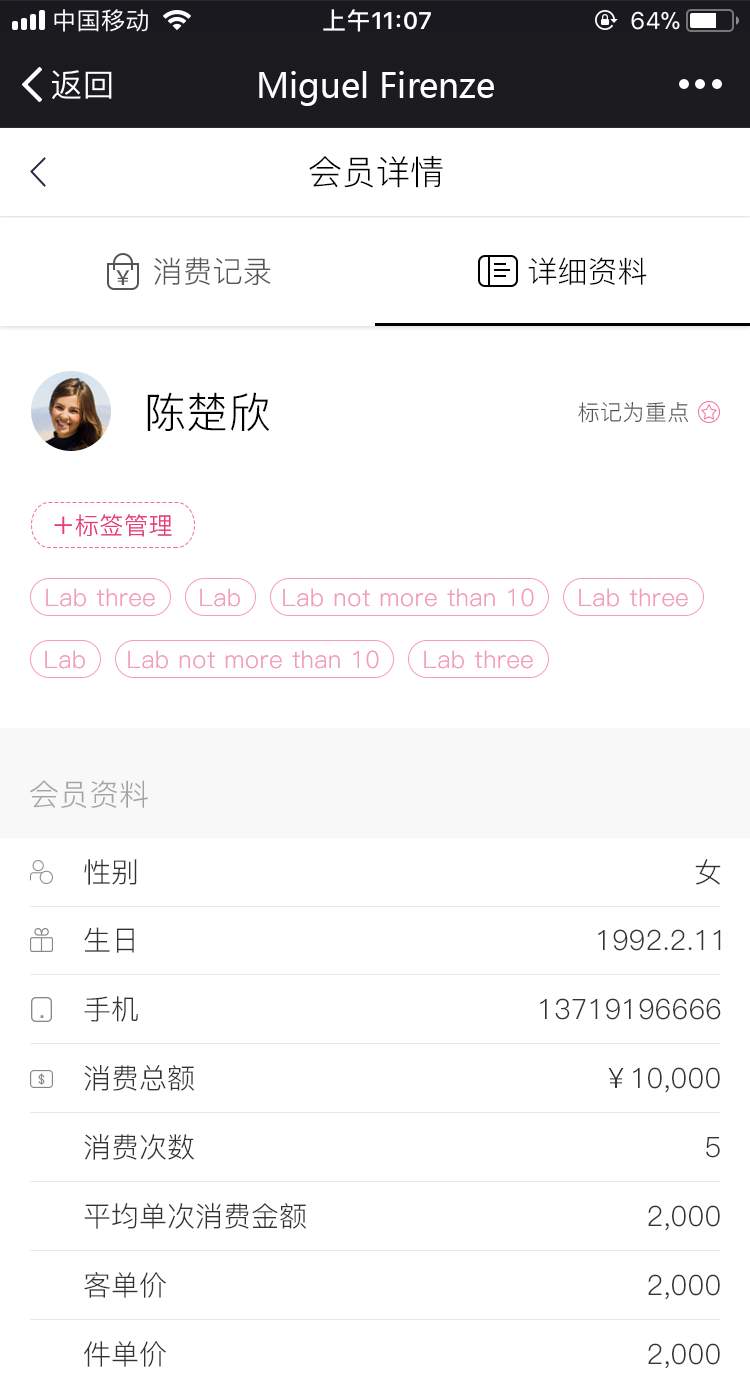
<style>
.page{position:relative;width:750px;height:1388px;background:#ffffff}
.page>*{position:absolute;margin:0}
.t1{font:34px "MicrosoftYaHei";color:#ffffff}
.t2{font:34px "PingFang-SC-Regular";color:#000000}
.t3{font:30px "PingFang-SC-Regular";color:#555555}
.t4{font:30px "PingFang-SC-Regular";color:#000000}
.t5{font:20px "SourceHanSansCN-Medium";color:#555555}
.t6{font:42px "PingFang-SC-Regular";letter-spacing:0.02em;color:#000000}
.t7{font:22px "PingFang-SC-Regular";letter-spacing:0.02em;color:#555555}
.t8{font:24px "PingFang-SC-Regular";letter-spacing:0.03em;color:#e43d7a}
.t9{font:34px "PingFang-SC-Regular";letter-spacing:0.03em;color:#e43d7a}
.t10{font:24px "PingFang-SC-Regular";letter-spacing:0.03em;color:#f19ebc}
.t11{font:30px "PingFang-SC-Regular";color:#a3a3a5}
.t12{font:28px "PingFang-SC-Regular";color:#333333}
</style>
<div class="page">
<p class="t1" style="left:259px;top:71px;width:235px;height:35px">Miguel Firenze</p>
<p class="t2" style="left:309px;top:156px;width:134px;height:32px">会员详情</p>
<p class="t3" style="left:154px;top:257px;width:117px;height:28px">消费记录</p>
<p class="t4" style="left:528px;top:257px;width:119px;height:28px">详细资料</p>
<p class="t5" style="left:116px;top:270px;width:14px;height:15px">￥</p>
<p class="t6" style="left:147px;top:392px;width:123px;height:40px">陈楚欣</p>
<p class="t7" style="left:578px;top:401px;width:110px;height:22px">标记为重点</p>
<p class="t8" style="left:54px;top:514px;width:118px;height:23px"><span class="t9">+</span>标签管理</p>
<p class="t10" style="left:46px;top:588px;width:109px;height:19px">Lab three</p>
<p class="t10" style="left:200px;top:588px;width:40px;height:19px">Lab</p>
<p class="t10" style="left:283px;top:588px;width:251px;height:19px">Lab not more than 10</p>
<p class="t10" style="left:579px;top:588px;width:109px;height:19px">Lab three</p>
<p class="t10" style="left:45px;top:650px;width:40px;height:19px">Lab</p>
<p class="t10" style="left:128px;top:650px;width:251px;height:19px">Lab not more than 10</p>
<p class="t10" style="left:424px;top:650px;width:109px;height:19px">Lab three</p>
<p class="t11" style="left:30px;top:780px;width:118px;height:28px">会员资料</p>
<p class="t12" style="left:84px;top:859px;width:53px;height:26px">性别</p>
<p class="t12" style="left:695px;top:859px;width:26px;height:26px">女</p>
<p class="t12" style="left:84px;top:927px;width:50px;height:26px">生日</p>
<p class="t12" style="left:598px;top:929px;width:123px;height:22px">1992.2.11</p>
<p class="t12" style="left:84px;top:996px;width:54px;height:26px">手机</p>
<p class="t12" style="left:540px;top:998px;width:181px;height:22px">13719196666</p>
<p class="t12" style="left:84px;top:1065px;width:110px;height:26px">消费总额</p>
<p class="t12" style="left:608px;top:1067px;width:112px;height:26px">￥10,000</p>
<p class="t12" style="left:84px;top:1134px;width:110px;height:26px">消费次数</p>
<p class="t12" style="left:706px;top:1137px;width:14px;height:21px">5</p>
<p class="t12" style="left:84px;top:1203px;width:222px;height:26px">平均单次消费金额</p>
<p class="t12" style="left:648px;top:1205px;width:72px;height:26px">2,000</p>
<p class="t12" style="left:84px;top:1272px;width:82px;height:26px">客单价</p>
<p class="t12" style="left:648px;top:1274px;width:72px;height:26px">2,000</p>
<p class="t12" style="left:84px;top:1341px;width:82px;height:26px">件单价</p>
<p class="t12" style="left:648px;top:1343px;width:72px;height:26px">2,000</p>
</div>
